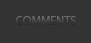
<style>
.page{position:relative;width:91px;height:43px;background:#333333}
.page>*{position:absolute;margin:0}
.t1{font:12px "MyriadPro-Regular"}
</style>
<div class="page">
<p class="t1" style="left:16px;top:16px;width:60px;height:9px">COMMENTS</p>
</div>
